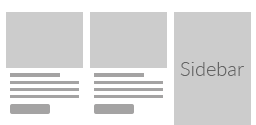
<style>
.page{position:relative;width:256px;height:125px;background:#cccccc}
.page>*{position:absolute;margin:0}
.t1{font:20px "Lato-Light";color:#636363}
</style>
<div class="page">
<p class="t1" style="left:180px;top:62px;width:64px;height:14px">Sidebar</p>
</div>
